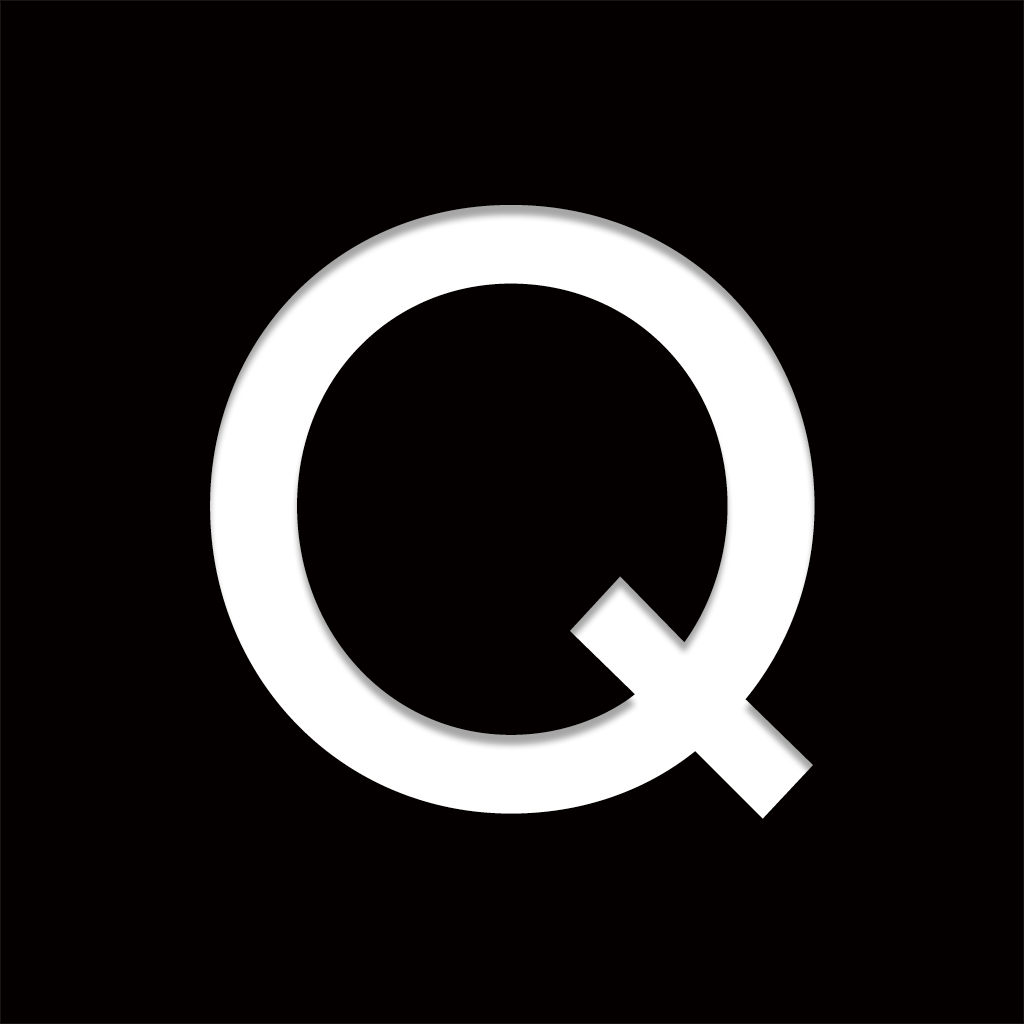
<style>
.page{position:relative;width:1024px;height:1024px;background:#040000}
.page>*{position:absolute;margin:0}
.t1{font:833.3px "Museo-500";color:#ffffff}
</style>
<div class="page">
<p class="t1" style="left:210px;top:205px;width:605px;height:614px">Q</p>
</div>
